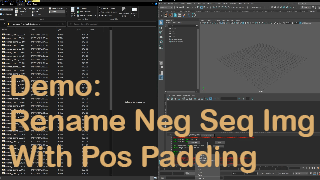
<style>
.page{position:relative;width:320px;height:180px;background:#1f1f1f}
.page>*{position:absolute;margin:0}
.t1{font:29.5px "ArialRoundedMTBold";color:#dbae6e}
</style>
<div class="page">
<p class="t1" style="left:9px;top:75px;width:305px;height:98px">Demo:<br>Rename Neg Seq Img<br>With Pos Padding</p>
</div>
